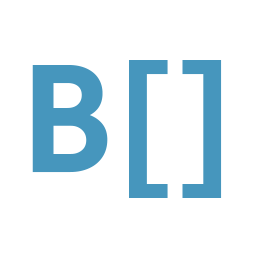
<style>
.page{position:relative;width:256px;height:256px;background:#ffffff}
.page>*{position:absolute;margin:0}
.t1{font:150px "AbletonSansSmall-Bold";color:#4696bd}
</style>
<div class="page">
<p class="t1" style="left:32px;top:60px;width:190px;height:138px">B[]</p>
</div>
